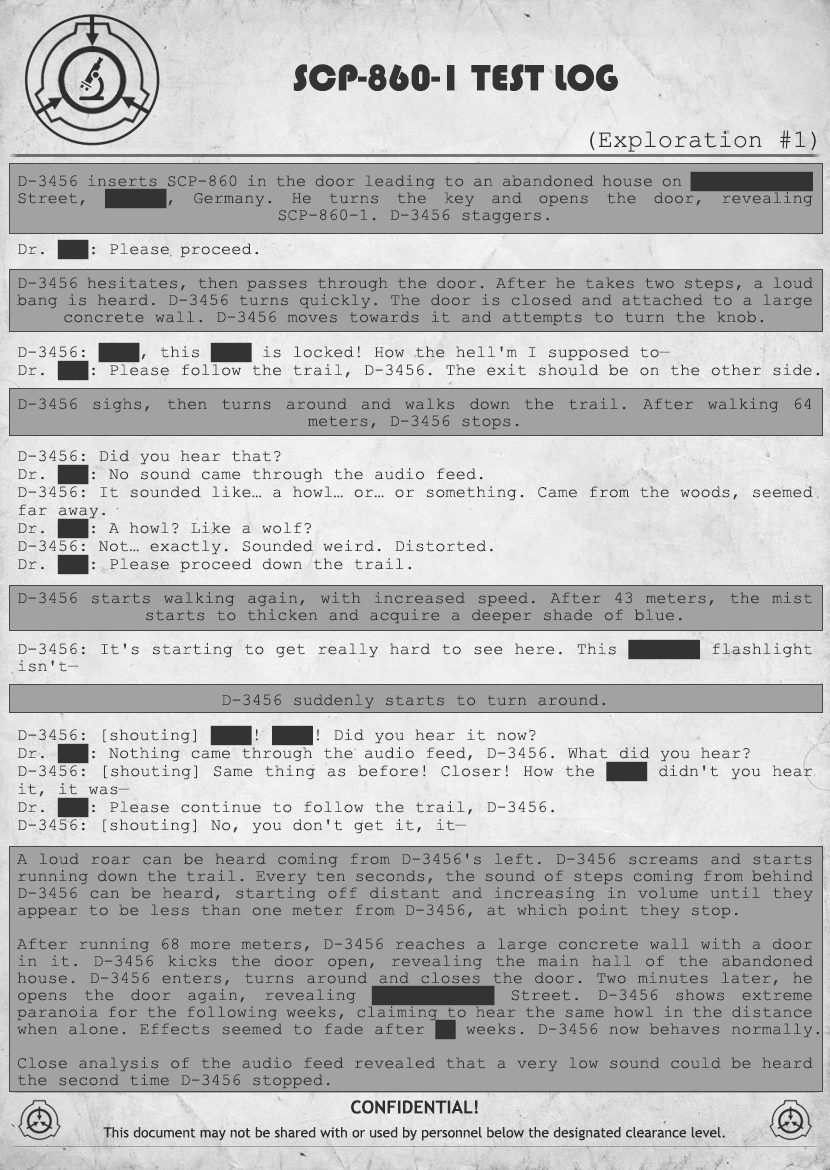
<style>
.page{position:relative;width:830px;height:1170px;background:#a2a2a2}
.page>*{position:absolute;margin:0}
.t1{font:38px "Bauhaus93";color:#333333;text-transform:uppercase}
.t2{font:25px "CourierNewPSMT";color:#333333}
.t3{font:17px/17px "CourierNewPSMT";color:#333333}
.t4{font:17px/18px "CourierNewPSMT";color:#333333}
.t5{font:14px/24px "TrebuchetMS";color:#333333}
.t6{font:18px/24px "TrebuchetMS-Bold";color:#333333}
</style>
<div class="page">
<p class="t1" style="left:293px;top:64px;width:325px;height:27px">SCP-860-1 Test log</p>
<p class="t2" style="left:590px;top:130px;width:226px;height:22px">(Exploration #1)</p>
<p class="t3" style="left:17px;top:171px;width:803px;height:918px;text-align:justify">D-3456 inserts SCP-860 in the door leading to an abandoned house on ████████████ Street, ██████, Germany. He turns the key and opens the door, revealing SCP-860-1. D-3456 staggers.<br><br>Dr. ███: Please proceed.<br><br>D-3456 hesitates, then passes through the door. After he takes two steps, a loud bang is heard. D-3456 turns quickly. The door is closed and attached to a large concrete wall. D-3456 moves towards it and attempts to turn the knob.<br><br><span class="t4">D-3456: ████, this ████ is locked! How the hell'm I supposed to—<br>Dr. ███: Please follow the trail, D-3456. The exit should be on the other side.<br></span><br>D-3456 sighs, then turns around and walks down the trail. After walking 64 meters, D-3456 stops.<br><br><span class="t4">D-3456: Did you hear that?<br>Dr. ███: No sound came through the audio feed.<br>D-3456: It sounded like… a howl… or… or something. Came from the woods, seemed far away.<br>Dr. ███: A howl? Like a wolf?<br>D-3456: Not… exactly. Sounded weird. Distorted.<br>Dr. ███: Please proceed down the trail.<br></span><br>D-3456 starts walking again, with increased speed. After 43 meters, the mist starts to thicken and acquire a deeper shade of blue.<br><br>D-3456: It's starting to get really hard to see here. This ███████ flashlight isn't—<br><br>D-3456 suddenly starts to turn around.<br><br><span class="t4">D-3456: [shouting] ████! ████! Did you hear it now?<br>Dr. ███: Nothing came through the audio feed, D-3456. What did you hear?<br>D-3456: [shouting] Same thing as before! Closer! How the ████ didn't you hear it, it was—<br>Dr. ███: Please continue to follow the trail, D-3456.<br>D-3456: [shouting] No, you don't get it, it—<br></span><br>A loud roar can be heard coming from D-3456's left. D-3456 screams and starts running down the trail. Every ten seconds, the sound of steps coming from behind D-3456 can be heard, starting off distant and increasing in volume until they appear to be less than one meter from D-3456, at which point they stop.<br><br>After running 68 more meters, D-3456 reaches a large concrete wall with a door in it. D-3456 kicks the door open, revealing the main hall of the abandoned house. D-3456 enters, turns around and closes the door. Two minutes later, he opens the door again, revealing ████████████ Street. D-3456 shows extreme paranoia for the following weeks, claiming to hear the same howl in the distance when alone. Effects seemed to fade after ██ weeks. D-3456 now behaves normally.<br><br>Close analysis of the audio feed revealed that a very low sound could be heard the second time D-3456 stopped.</p>
<p class="t5" style="left:103px;top:1100px;width:622px;height:41px;text-align:center"><span class="t6">CONFIDENTIAL!<br></span>This document may not be shared with or used by personnel below the designated clearance level.</p>
</div>
